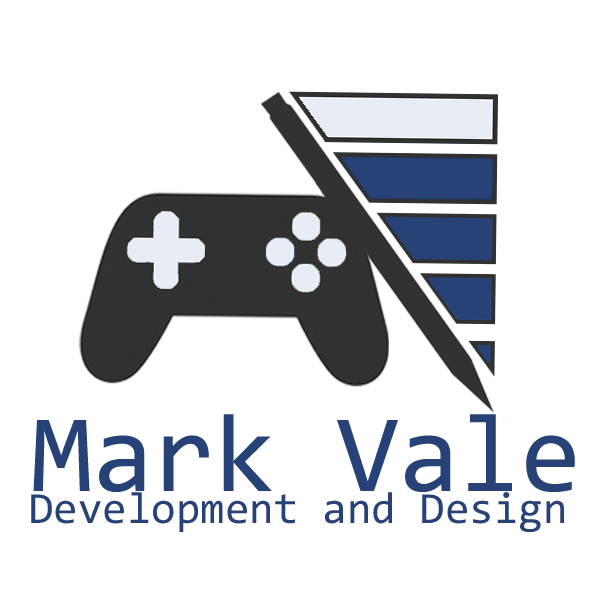
<style>
.page{position:relative;width:599px;height:596px;background:#ffffff}
.page>*{position:absolute;margin:0}
.t1{font:111.1px "Consolas";color:#264276}
.t2{font:44.4px "Consolas";color:#264276}
</style>
<div class="page">
<p class="t1" style="left:33px;top:414px;width:542px;height:78px">Mark Vale</p>
<p class="t2" style="left:31px;top:492px;width:533px;height:40px">Development and Design</p>
</div>
